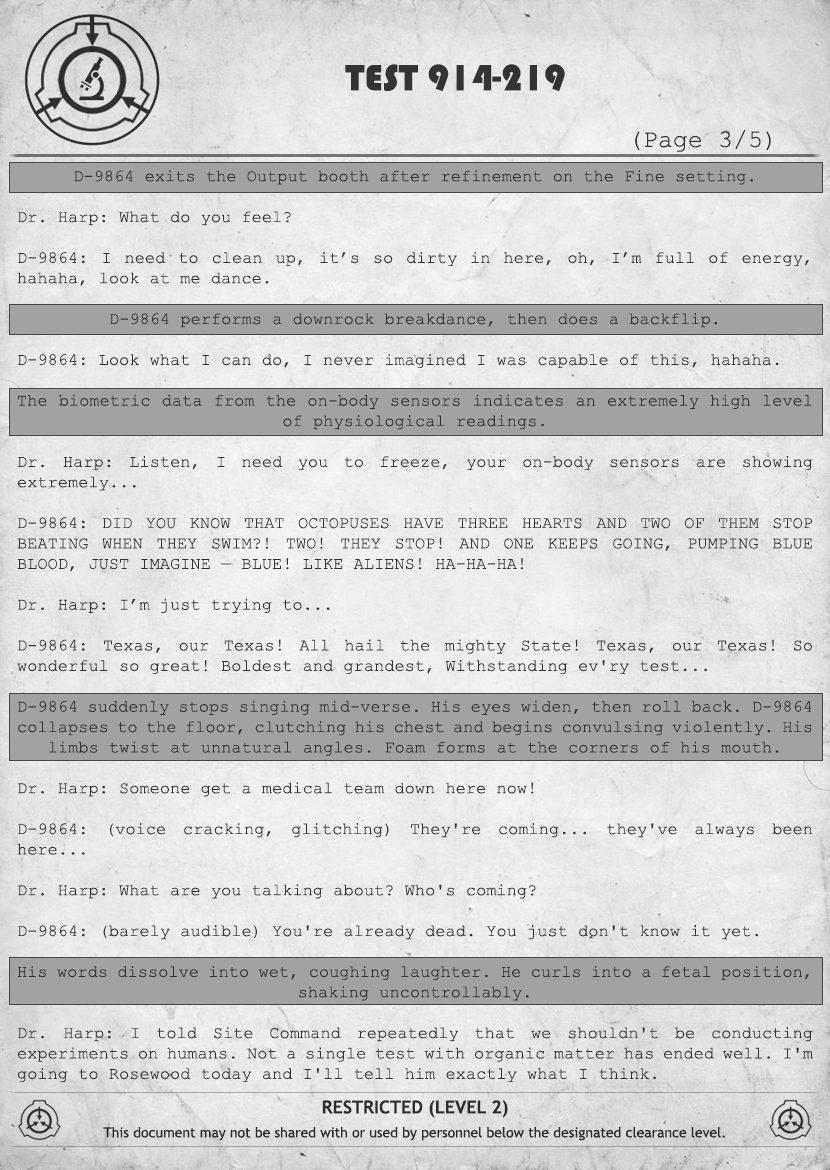
<style>
.page{position:relative;width:830px;height:1170px}
.page>*{position:absolute;margin:0}
.t1{font:38px "Bauhaus93";color:#333333;text-transform:uppercase}
.t2{font:25px "CourierNewPSMT";color:#333333}
.t3{font:17px "CourierNewPSMT";color:#333333}
.t4{font:14px/24px "TrebuchetMS";color:#333333}
.t5{font:18px/24px "TrebuchetMS-Bold";color:#333333}
</style>
<div class="page">
<p class="t1" style="left:345px;top:64px;width:220px;height:28px">TEST 914-219</p>
<p class="t2" style="left:635px;top:129px;width:136px;height:23px">(Page 3/5)</p>
<p class="t3" style="left:17px;top:170px;width:796px;height:912px;text-align:justify">D-9864 exits the Output booth after refinement on the Fine setting.<br><br>Dr. Harp: What do you feel?<br><br>D-9864: I need to clean up, it’s so dirty in here, oh, I’m full of energy, hahaha, look at me dance.<br><br>D-9864 performs a downrock breakdance, then does a backflip.<br><br>D-9864: Look what I can do, I never imagined I was capable of this, hahaha.<br><br>The biometric data from the on-body sensors indicates an extremely high level of physiological readings.<br><br>Dr. Harp: Listen, I need you to freeze, your on-body sensors are showing extremely...<br><br>D-9864: DID YOU KNOW THAT OCTOPUSES HAVE THREE HEARTS AND TWO OF THEM STOP BEATING WHEN THEY SWIM?! TWO! THEY STOP! AND ONE KEEPS GOING, PUMPING BLUE BLOOD, JUST IMAGINE — BLUE! LIKE ALIENS! HA-HA-HA!<br><br>Dr. Harp: I’m just trying to...<br><br>D-9864: Texas, our Texas! All hail the mighty State! Texas, our Texas! So wonderful so great! Boldest and grandest, Withstanding ev'ry test...<br><br>D-9864 suddenly stops singing mid-verse. His eyes widen, then roll back. D-9864 collapses to the floor, clutching his chest and begins convulsing violently. His limbs twist at unnatural angles. Foam forms at the corners of his mouth.<br><br>Dr. Harp: Someone get a medical team down here now!<br><br>D-9864: (voice cracking, glitching) They're coming... they've always been here...<br><br>Dr. Harp: What are you talking about? Who's coming?<br><br>D-9864: (barely audible) You're already dead. You just don't know it yet.<br><br>His words dissolve into wet, coughing laughter. He curls into a fetal position, shaking uncontrollably.<br><br>Dr. Harp: I told Site Command repeatedly that we shouldn't be conducting experiments on humans. Not a single test with organic matter has ended well. I'm going to Rosewood today and I'll tell him exactly what I think.</p>
<p class="t4" style="left:103px;top:1100px;width:622px;height:41px;text-align:center"><span class="t5">RESTRICTED (LEVEL 2)<br></span>This document may not be shared with or used by personnel below the designated clearance level.</p>
</div>
